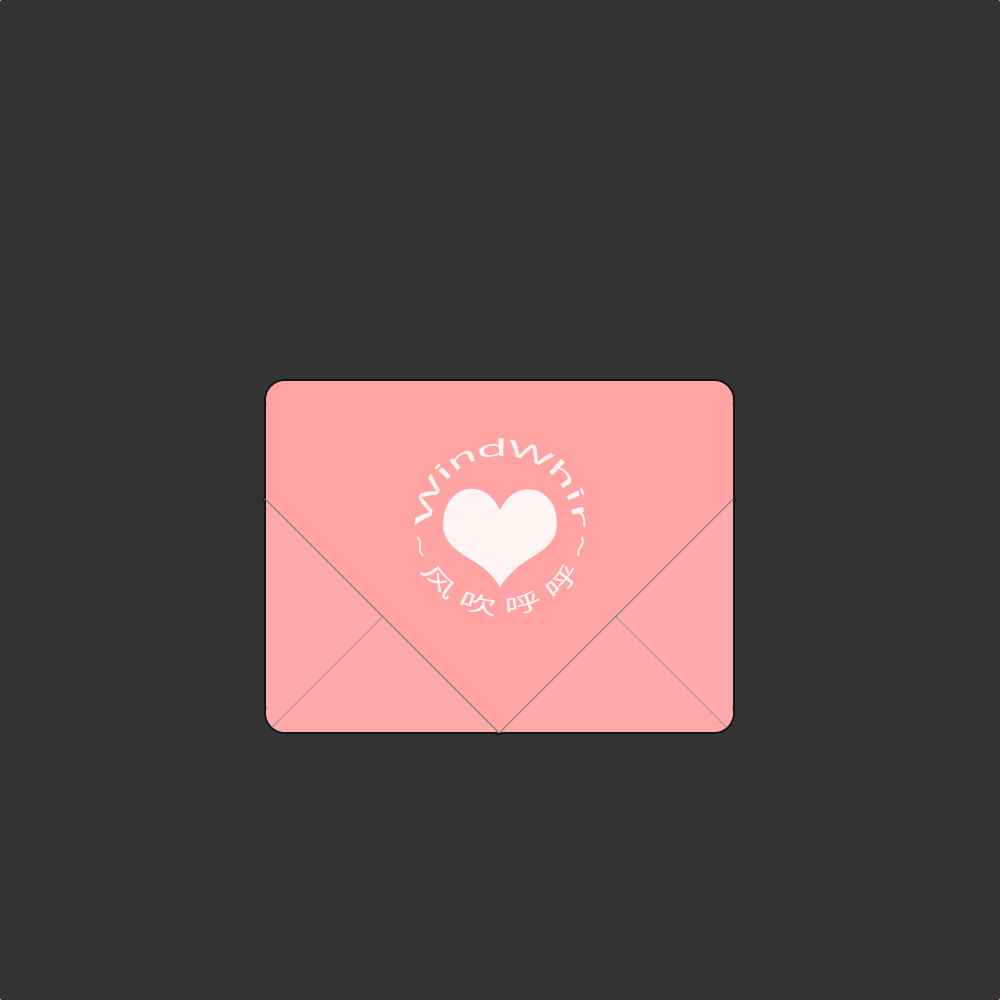
<style>
.page{position:relative;width:1000px;height:1000px;background:#333333}
.page>*{position:absolute;margin:0}
.t1{font:21.6px "SourceHanSansCN-Normal";color:#fff4f4}
</style>
<div class="page">
<p class="t1" style="left:414px;top:438px;width:172px;height:89px;text-align:center">WindWhir</p>
<p class="t1" style="left:417px;top:536px;width:167px;height:80px;text-align:center">~ 风 吹 呼 呼 ~</p>
</div>
